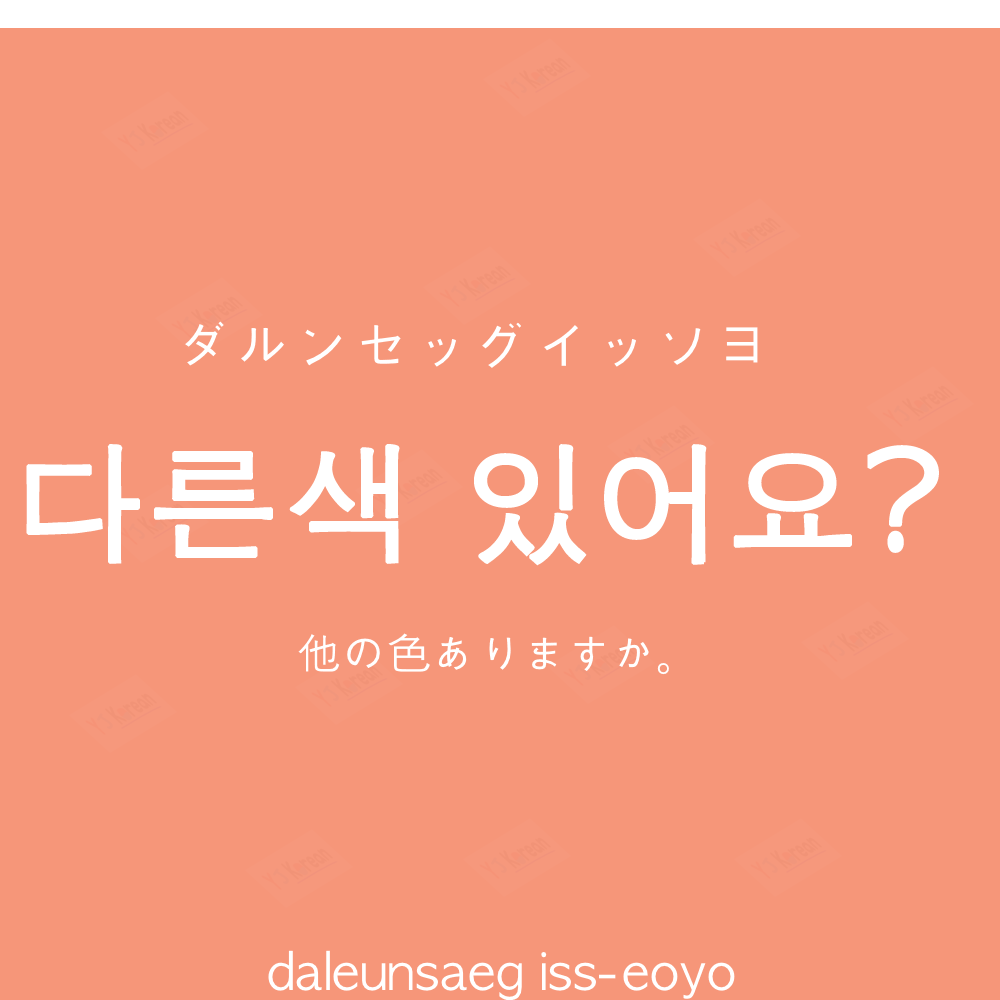
<style>
.page{position:relative;width:1000px;height:1000px;background:#f69679}
.page>*{position:absolute;margin:0}
.t1{font:60px "AppleGothic";color:#ffffff}
.t2{font:130px "AppleGothic";color:#ffffff;font-weight:bold}
.t3{font:45px "AppleGothic";color:#ffffff}
.t4{font:50px "AppleGothic";color:#ffffff}
</style>
<div class="page">
<p class="t1" style="left:185px;top:321px;width:573px;height:47px">ダルンセッグイッソヨ</p>
<p class="t2" style="left:26px;top:444px;width:913px;height:122px">다른색 있어요?</p>
<p class="t3" style="left:298px;top:633px;width:371px;height:42px">他の色ありますか。</p>
<p class="t4" style="left:268px;top:950px;width:467px;height:51px">daleunsaeg iss-eoyo</p>
</div>
